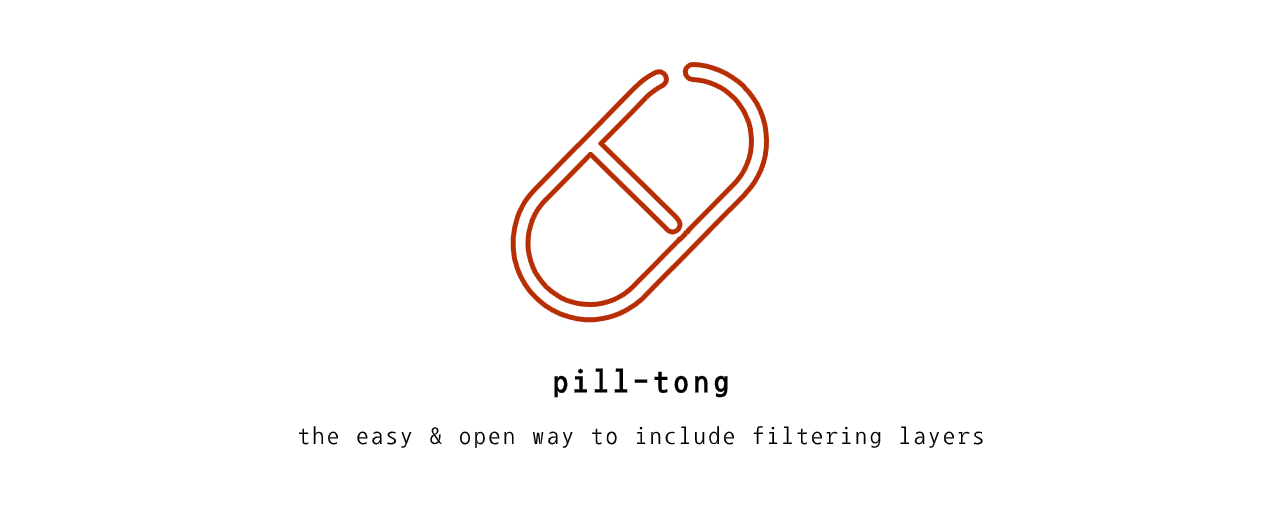
<style>
.page{position:relative;width:1280px;height:512px;background:#ffffff}
.page>*{position:absolute;margin:0}
.t1{font:24px/52.1px "NanumGothicCoding";letter-spacing:0.111em;color:#000000}
.t2{font:32px/52.1px "NanumGothicCoding-Bold";letter-spacing:0.128em;color:#000000}
</style>
<div class="page">
<p class="t1" style="left:298px;top:368px;width:685px;height:80px;text-align:center"><span class="t2">pill-tong<br></span>the easy &amp; open way to include filtering layers</p>
</div>
